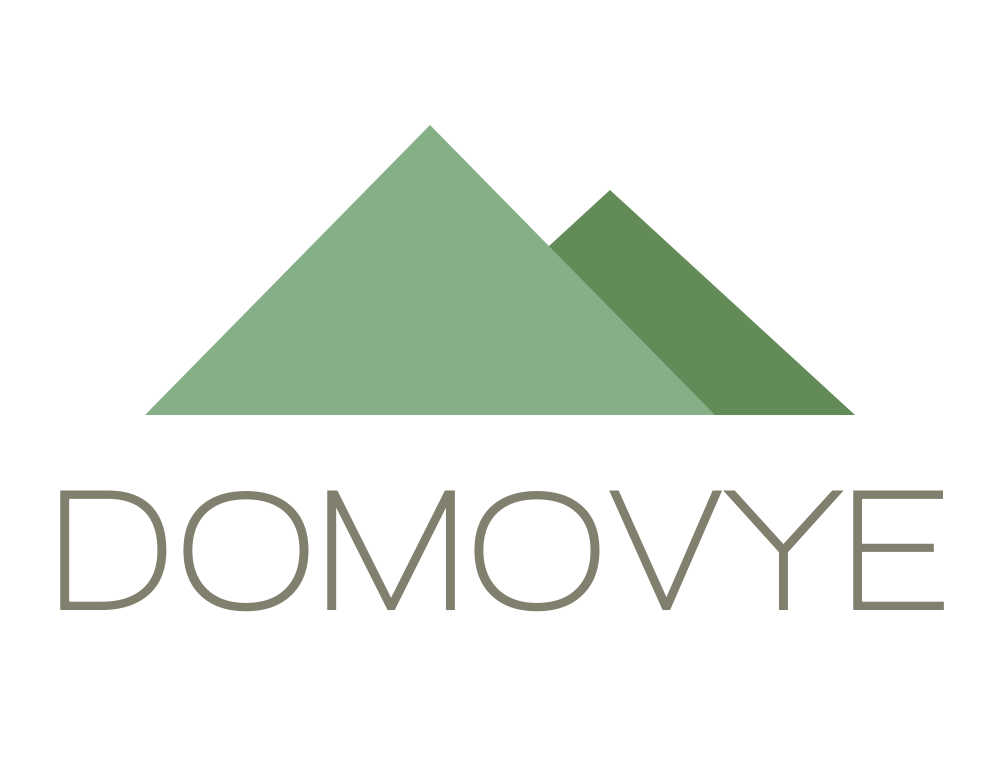
<style>
.page{position:relative;width:1000px;height:770px;background:#ffffff}
.page>*{position:absolute;margin:0}
.t1{font:176.2px "WalkwayBold";letter-spacing:0.05em;color:#81806e;text-transform:uppercase}
</style>
<div class="page">
<p class="t1" style="left:60px;top:490px;width:884px;height:122px">domovye</p>
</div>
